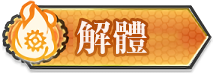
<style>
.page{position:relative;width:213px;height:75px}
.page>*{position:absolute;margin:0}
.t1{font:36px "RyuminPr6N-ExBold";color:#fef4ed}
</style>
<div class="page">
<p class="t1" style="left:77px;top:20px;width:70px;height:34px">解體</p>
</div>
